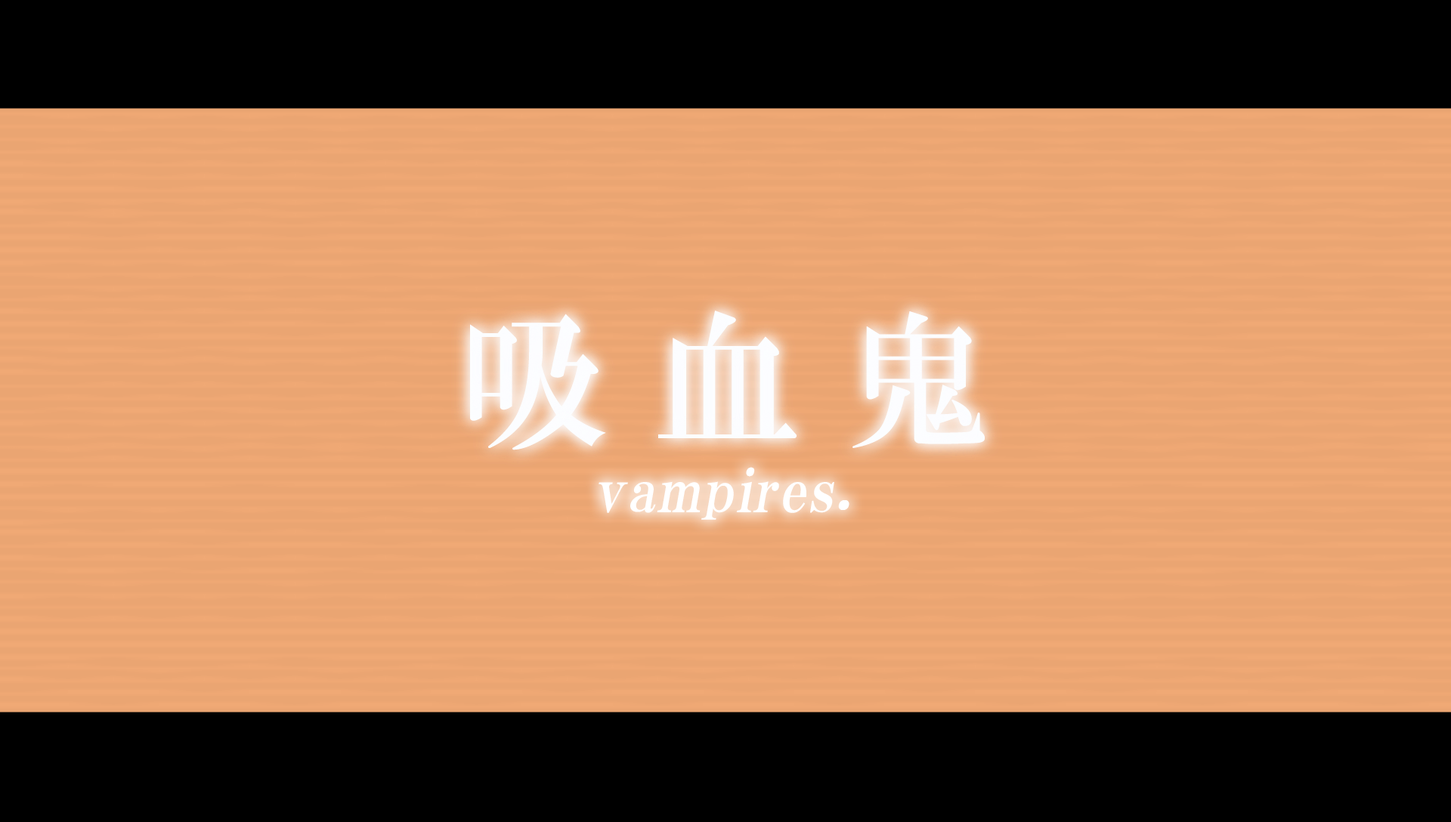
<style>
.page{position:relative;width:1451px;height:822px;background:#000000}
.page>*{position:absolute;margin:0}
.t1{font:148.1px "HGMinchoB";letter-spacing:0.29em;color:#fcfdff}
.t2{font:58.9px "HGPMinchoE";letter-spacing:0.025em;color:#ffffff;font-style:italic}
</style>
<div class="page">
<p class="t1" style="left:470px;top:311px;width:514px;height:139px">吸血鬼</p>
<p class="t2" style="left:598px;top:467px;width:251px;height:53px">vampires.</p>
</div>
